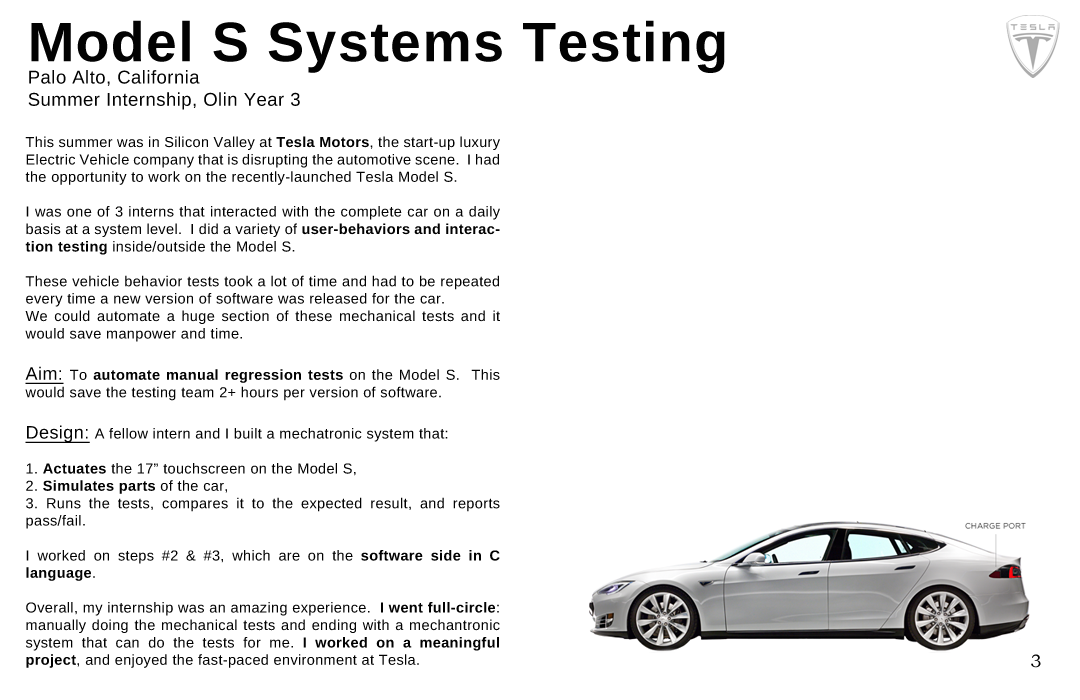
<style>
.page{position:relative;width:1080px;height:700px;background:#ffffff}
.page>*{position:absolute;margin:0}
.t1{font:18.5px "LiberationSans";letter-spacing:0.025em;color:#020202}
.t2{font:55.6px "LiberationSans-Bold";letter-spacing:0.025em;color:#020202}
.t3{font:14.5px "LiberationSans";letter-spacing:0.025em;color:#020202}
.t4{font:14.5px "LiberationSans-Bold";letter-spacing:0.025em;color:#020202}
.t5{font:18px "LiberationSans";letter-spacing:0.025em;color:#020202;text-decoration:underline}
.t6{font:18px "BookmanOldStyle";letter-spacing:0.025em;color:#020202}
</style>
<div class="page">
<p class="t1" style="left:28px;top:20px;width:697px;height:90px;text-align:justify"><span class="t2">Model S Systems Testing<br></span>Palo Alto, California<br>Summer Internship, Olin Year 3</p>
<p class="t3" style="left:25px;top:136px;width:475px;height:532px;text-align:justify">This summer was in Silicon Valley at <span class="t4">Tesla Motors</span>, the start-up luxury Electric Vehicle company that is disrupting the automotive scene.  I had the opportunity to work on the recently-launched Tesla Model S.<br><br>I was one of 3 interns that interacted with the complete car on a daily basis at a system level.  I did a variety of <span class="t4">user-behaviors and interaction testing</span> inside/outside the Model S.<br><br>These vehicle behavior tests took a lot of time and had to be repeated every time a new version of software was released for the car.  <br>We could automate a huge section of these mechanical tests and it would save manpower and time. <br><br><span class="t5">Aim: </span>To <span class="t4">automate manual regression tests</span> on the Model S.  This would save the testing team 2+ hours per version of software.<br><br><span class="t5">Design: </span>A fellow intern and I built a mechatronic system that:<br><br>1. <span class="t4">Actuates</span> the 17” touchscreen on the Model S,<br>2. <span class="t4">Simulates parts </span>of the car,<br>3. Runs the tests, compares it to the expected result, and reports pass/fail. <br><br>I worked on steps #2 &amp; #3, which are on the <span class="t4">software side in C language</span>.<br><br>Overall, my internship was an amazing experience.  <span class="t4">I went full-circle</span>: manually doing the mechanical tests and ending with a mechantronic system that can do the tests for me. <span class="t4">I worked on a meaningful project</span>, and enjoyed the fast-paced environment at Tesla.</p>
<p class="t6" style="left:1031px;top:654px;width:10px;height:14px">3</p>
</div>
